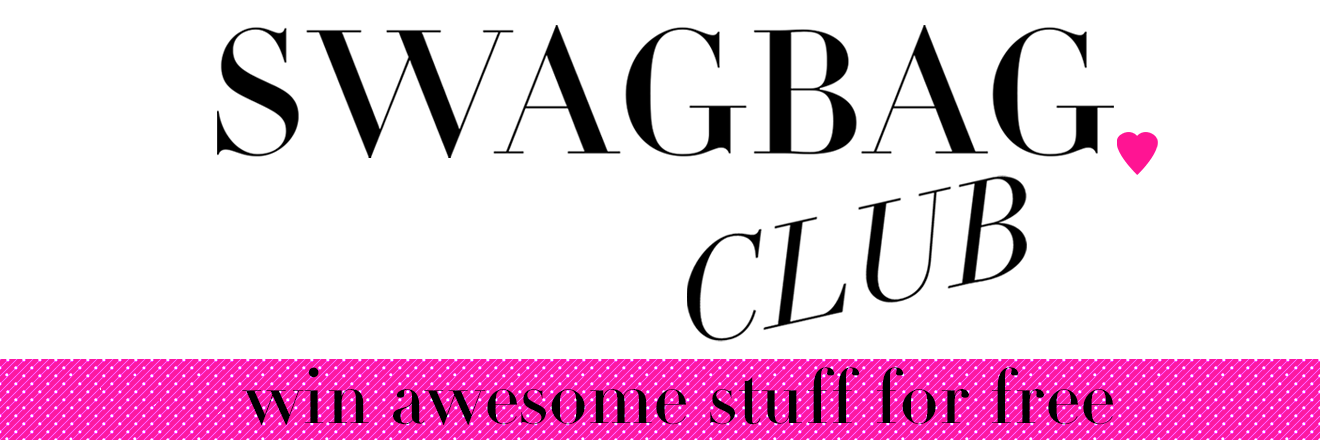
<style>
.page{position:relative;width:1320px;height:440px;background:#ffffff}
.page>*{position:absolute;margin:0}
.t1{font:75px "DidotLTStd-Headline";color:#000000}
</style>
<div class="page">
<p class="t1" style="left:242px;top:367px;width:871px;height:58px">win awesome stuff for free</p>
</div>
